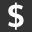
<style>
.page{position:relative;width:32px;height:32px;background:#333333}
.page>*{position:absolute;margin:0}
.t1{font:30px "Oxygen-Bold";letter-spacing:0.2em;color:#ffffff;text-transform:uppercase}
</style>
<div class="page">
<p class="t1" style="left:8px;top:2px;width:16px;height:28px">$</p>
</div>
